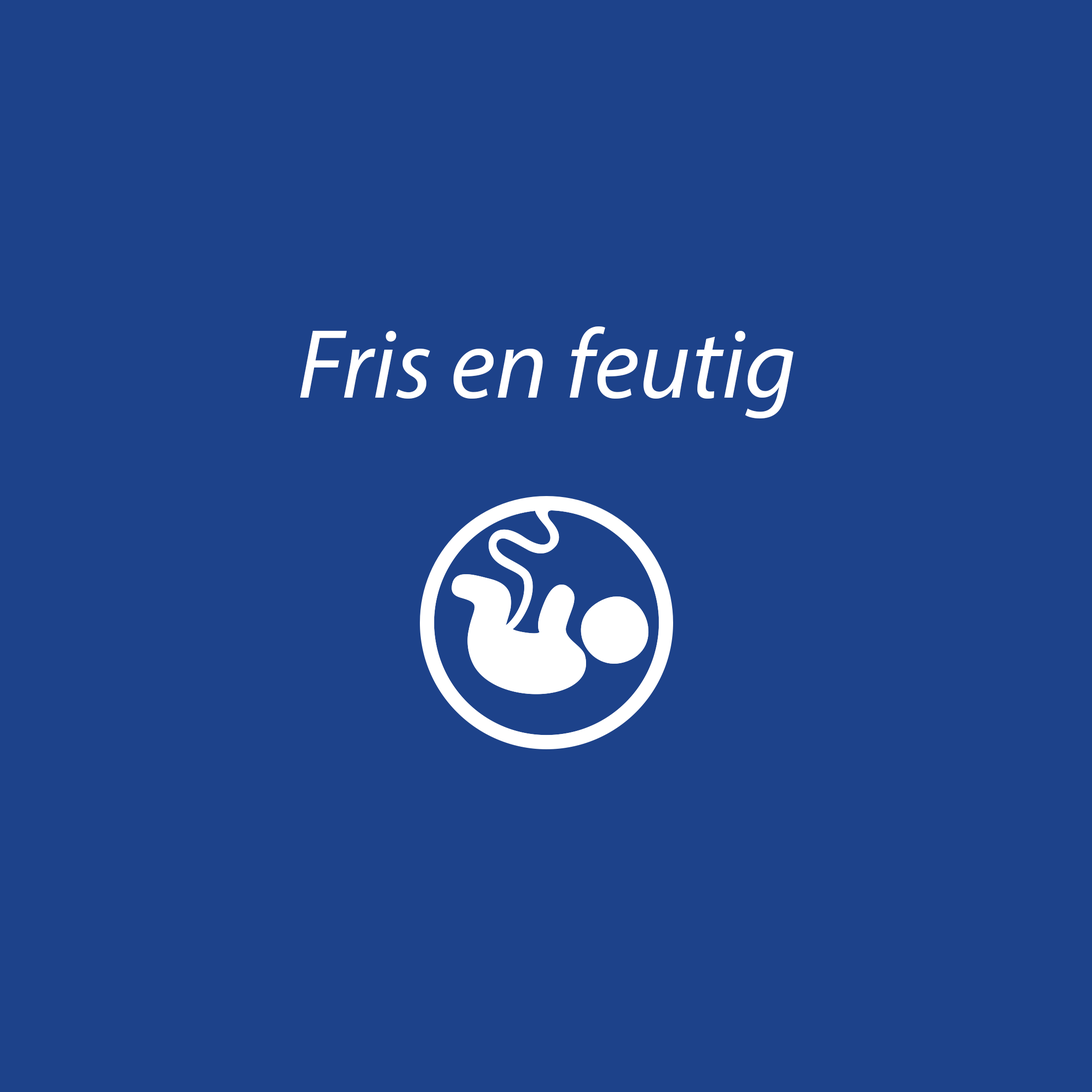
<style>
.page{position:relative;width:1092px;height:1092px;background:#1d428a}
.page>*{position:absolute;margin:0}
.t1{font:98.9px "MyriadPro-It";color:#ffffff}
</style>
<div class="page">
<p class="t1" style="left:300px;top:326px;width:494px;height:93px">Fris en feutig</p>
</div>
